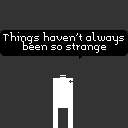
<style>
.page{position:relative;width:128px;height:128px;background:#333333}
.page>*{position:absolute;margin:0}
.t1{font:8px "Memoria";color:#ffffff}
</style>
<div class="page">
<p class="t1" style="left:3px;top:32px;width:121px;height:21px;text-align:center">Things haven't always<br>been so strange</p>
</div>
